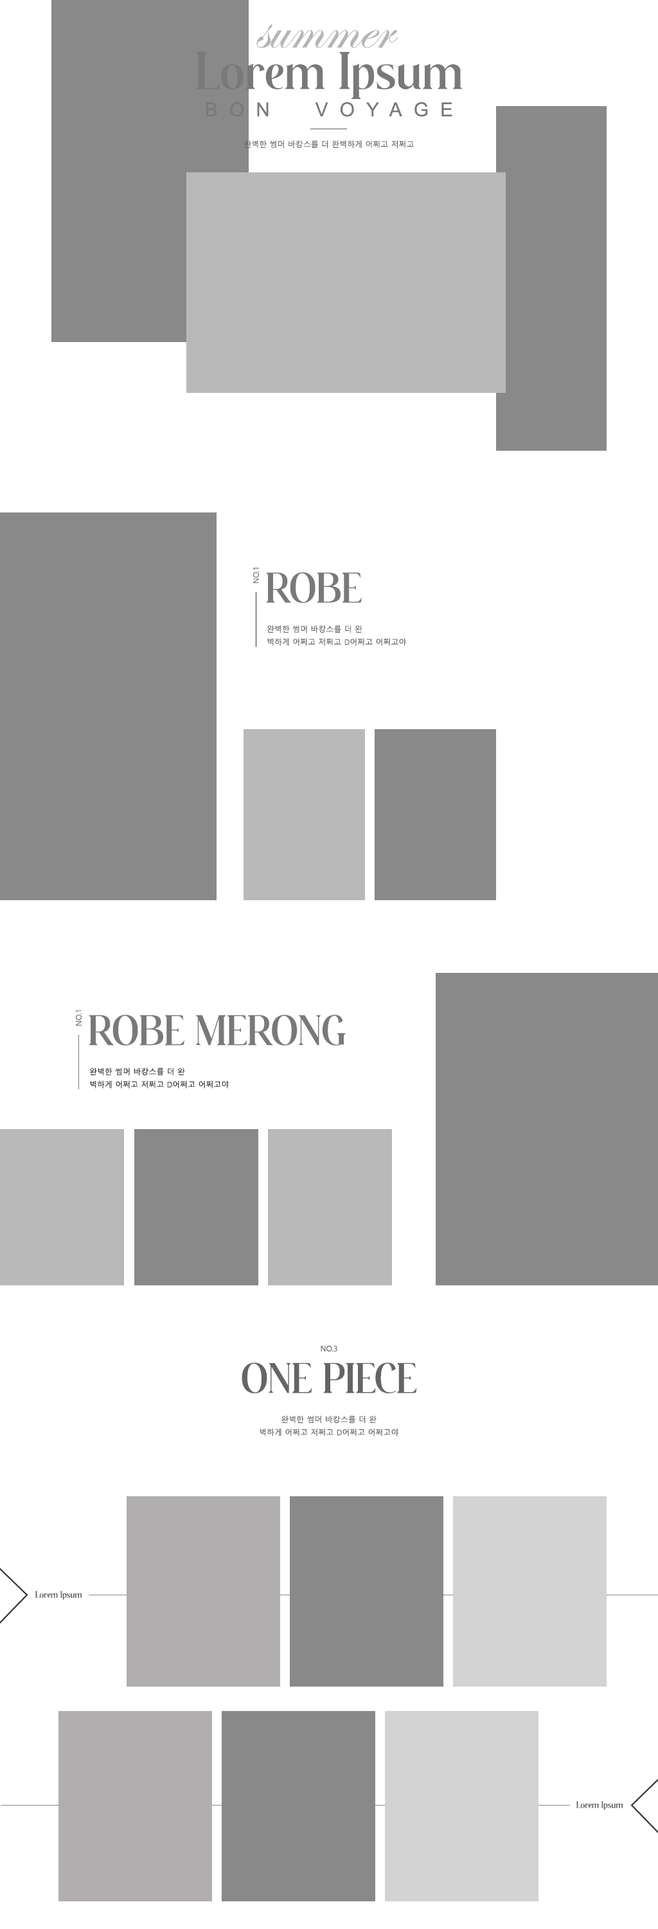
<style>
.page{position:relative;width:658px;height:1929px;background:#ffffff}
.page>*{position:absolute;margin:0}
.t1{font:64.3px "EdwardianScriptITC";color:#b5b5b5}
.t2{font:51.4px "WalkesterRegular";color:#797979}
.t3{font:19.3px "ArialMT";letter-spacing:0.6em;color:#797979}
.t4{font:7.7px "MalgunGothic";color:#656565}
.t5{font:7.7px "MalgunGothic";color:#797979}
.t6{font:41.8px "WalkesterRegular";color:#797979}
.t7{font:7.7px/12.9px "MalgunGothic";color:#656565}
.t8{font:7.7px/12.9px "MalgunGothic";color:#2b2b2b}
.t9{font:41.8px "WalkesterRegular";color:#656565}
.t10{font:9px "WalkesterRegular";color:#656565}
</style>
<div class="page">
<p class="t1" style="left:256px;top:24px;width:143px;height:24px">summer</p>
<p class="t2" style="left:196px;top:51px;width:267px;height:48px">Lorem Ipsum</p>
<p class="t3" style="left:206px;top:102px;width:247px;height:15px">BON  VOYAGE</p>
<p class="t4" style="left:244px;top:140px;width:170px;height:8px">완벽한 썸머 바캉스를 더 완벽하게 어쩌고 저쩌고</p>
<p class="t5" style="left:253px;top:568px;width:6px;height:15px;rotate:180deg">NO.1</p>
<p class="t6" style="left:266px;top:572px;width:96px;height:31px">ROBE</p>
<p class="t7" style="left:267px;top:625px;width:139px;height:21px">완벽한 썸머 바캉스를 더 완<br>벽하게 어쩌고 저쩌고 D어쩌고 어쩌고야</p>
<p class="t5" style="left:75px;top:1010px;width:7px;height:15px;rotate:180deg">NO.1</p>
<p class="t6" style="left:89px;top:1014px;width:257px;height:31px">ROBE MERONG</p>
<p class="t8" style="left:89px;top:1067px;width:140px;height:21px">완벽한 썸머 바캉스를 더 완<br>벽하게 어쩌고 저쩌고 D어쩌고 어쩌고야</p>
<p class="t4" style="left:321px;top:1345px;width:17px;height:6px">NO.3</p>
<p class="t9" style="left:242px;top:1362px;width:175px;height:31px">ONE PIECE</p>
<p class="t7" style="left:260px;top:1415px;width:139px;height:21px;text-align:center">완벽한 썸머 바캉스를 더 완<br>벽하게 어쩌고 저쩌고 D어쩌고 어쩌고야</p>
<p class="t10" style="left:35px;top:1590px;width:47px;height:9px">Lorem Ipsum</p>
<p class="t10" style="left:577px;top:1801px;width:47px;height:9px">Lorem Ipsum</p>
</div>
